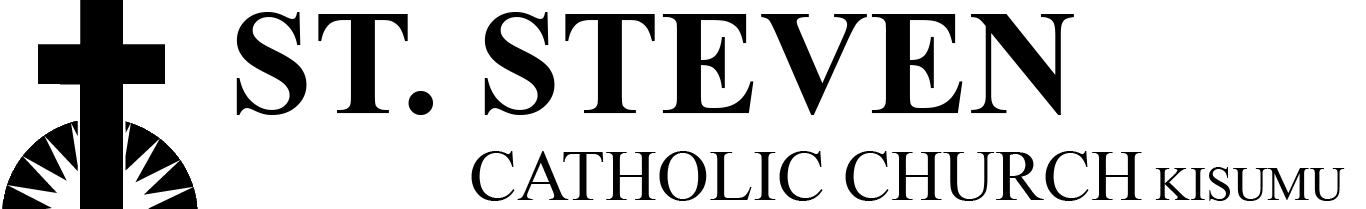
<style>
.page{position:relative;width:1366px;height:209px;background:#ffffff}
.page>*{position:absolute;margin:0}
.t1{font:72px "TimesNewRomanPSMT";color:#000000}
.t2{font:150px "TimesNewRomanPS-BoldMT";color:#000000}
.t3{font:48px "TimesNewRomanPSMT";color:#000000}
</style>
<div class="page">
<p class="t1" style="left:236px;top:12px;width:1109px;height:189px"><span class="t2">ST. STEVEN <br>                    </span>CATHOLIC CHURCH<span class="t3"> KISUMU</span></p>
</div>
